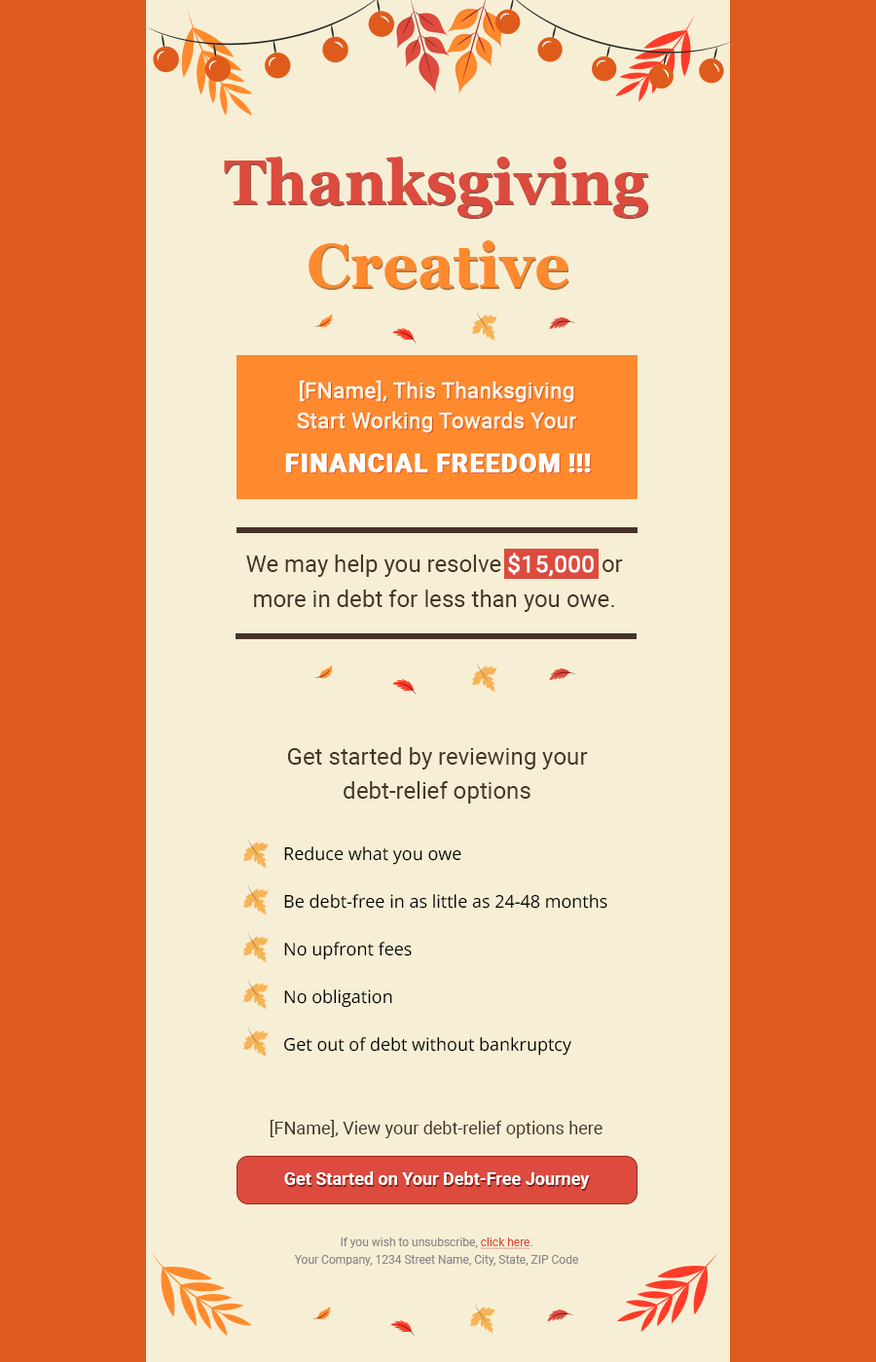
<style>
.page{position:relative;width:876px;height:1362px;background:#f7efd5}
.page>*{position:absolute;margin:0}
.t1{font:61.3px "Georgia-Bold";color:#dc4b3e}
.t2{font:61.3px "Georgia-Bold";color:#ff8a2e}
.t3{font:21.4px/30.2px "Roboto-Regular";color:#faf4e2;font-weight:bold}
.t4{font:25.3px "Roboto-Black";color:#ffffff;text-transform:uppercase;font-weight:bold}
.t5{font:23.3px/35px "Roboto-Regular";color:#463328}
.t6{font:23.3px/35px "Roboto-Regular";color:#ffffff;font-weight:bold}
.t7{font:23.3px/34px "Roboto-Regular";color:#463328}
.t8{font:17.5px/47.7px "OpenSans-Regular";color:#000000}
.t9{font:17.5px "Roboto-Regular";color:#463328}
.t10{font:17.5px "Roboto-Bold";color:#ffffff}
.t11{font:11.7px/17.5px "Roboto-Regular";color:#888888}
.t12{font:11.7px/17.5px "Roboto-Regular";color:#dc4b3e;text-decoration:underline}
</style>
<div class="page">
<p class="t1" style="left:224px;top:157px;width:424px;height:60px">Thanksgiving</p>
<p class="t2" style="left:308px;top:240px;width:260px;height:48px">Creative</p>
<p class="t3" style="left:297px;top:380px;width:279px;height:53px;text-align:center">[FName], This Thanksgiving <br>Start Working Towards Your</p>
<p class="t4" style="left:285px;top:453px;width:306px;height:20px">Financial Freedom !!!</p>
<p class="t5" style="left:246px;top:553px;width:377px;height:59px;text-align:center">We may help you resolve <span class="t6">$15,000 </span>or more in debt for less than you owe.</p>
<p class="t7" style="left:287px;top:747px;width:301px;height:57px;text-align:center">Get started by reviewing your <br>debt-relief options</p>
<p class="t8" style="left:284px;top:846px;width:323px;height:210px">Reduce what you owe<br>Be debt-free in as little as 24-48 months<br>No upfront fees<br>No obligation<br>Get out of debt without bankruptcy</p>
<p class="t9" style="left:269px;top:1120px;width:333px;height:18px">[FName], View your debt-relief options here</p>
<p class="t10" style="left:284px;top:1171px;width:306px;height:18px">Get Started on Your Debt-Free Journey</p>
<p class="t11" style="left:294px;top:1237px;width:284px;height:29px;text-align:center">If you wish to unsubscribe, <span class="t12">click here</span>.<br>Your Company, 1234 Street Name, City, State, ZIP Code</p>
</div>
